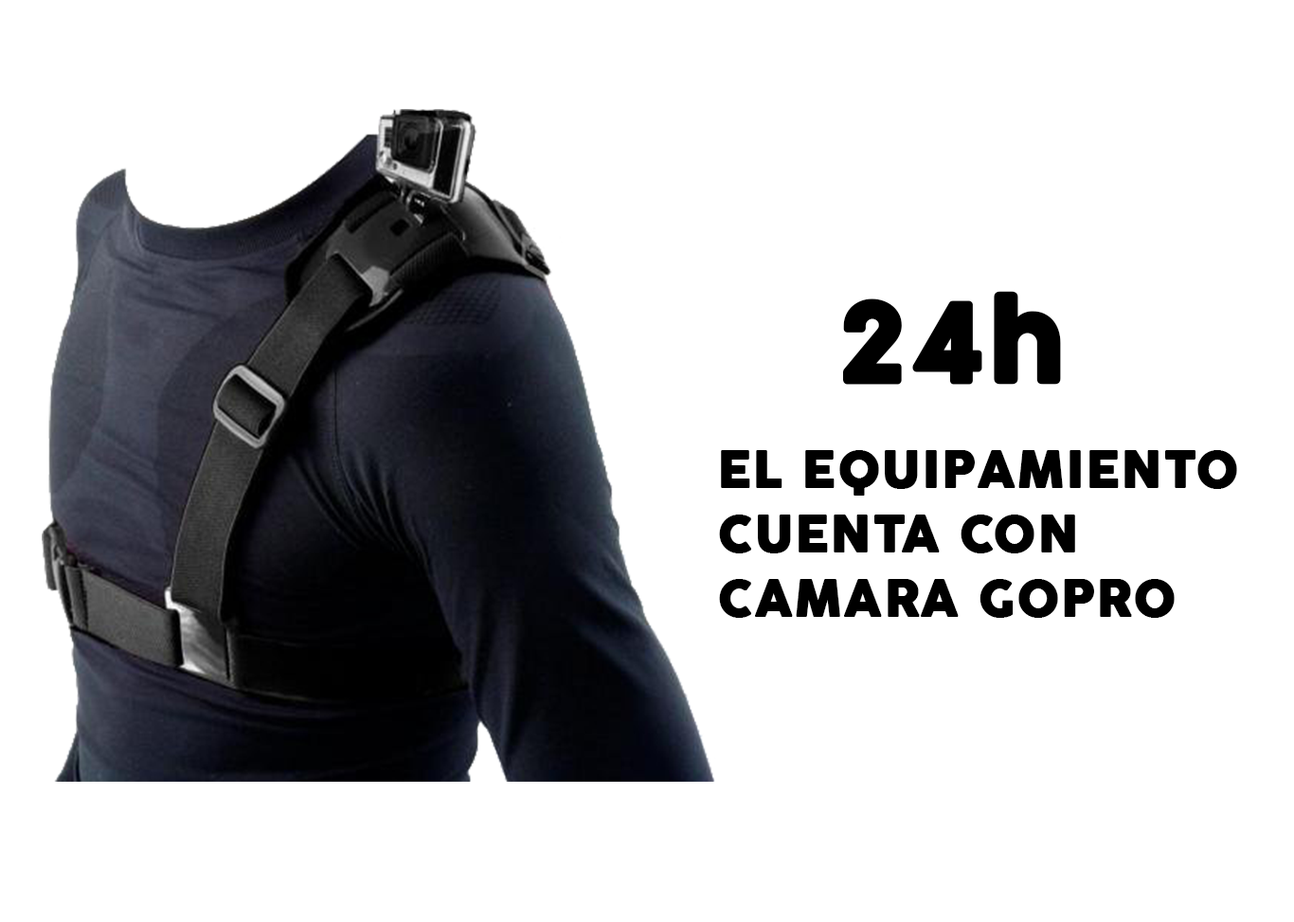
<style>
.page{position:relative;width:1294px;height:922px;background:#ffffff}
.page>*{position:absolute;margin:0}
.t1{font:108.9px "COCOGOOSE";letter-spacing:0.017em;color:#000000;font-weight:bold}
.t2{font:49.3px/64.4px "COCOGOOSE";letter-spacing:0.017em;color:#000000;font-weight:bold}
</style>
<div class="page">
<p class="t1" style="left:843px;top:291px;width:218px;height:94px">24h</p>
<p class="t2" style="left:719px;top:450px;width:518px;height:168px">EL EQUIPAMIENTO CUENTA CON CAMARA GOPRO</p>
</div>
